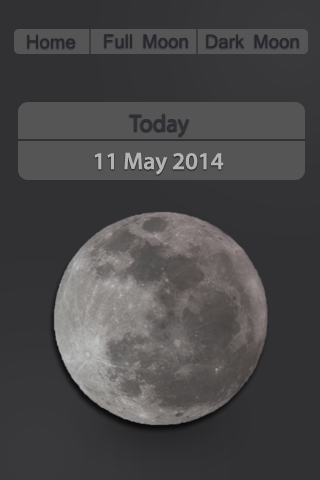
<style>
.page{position:relative;width:320px;height:480px;background:#313133}
.page>*{position:absolute;margin:0}
.t1{font:18px "Mangal";color:#272730}
.t2{font:24px "MyriadPro-Regular";color:#303037}
.t3{font:24px "MyriadPro-Semibold";color:#b3b3b3}
</style>
<div class="page">
<p class="t1" style="left:27px;top:34px;width:49px;height:15px">Home</p>
<p class="t1" style="left:104px;top:34px;width:84px;height:15px">Full Moon</p>
<p class="t1" style="left:206px;top:34px;width:93px;height:15px">Dark Moon</p>
<p class="t2" style="left:129px;top:113px;width:60px;height:24px">Today</p>
<p class="t3" style="left:94px;top:152px;width:130px;height:23px">11 May 2014</p>
</div>
